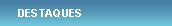
<style>
.page{position:relative;width:172px;height:26px}
.page>*{position:absolute;margin:0}
.t1{font:11px "Arial-BoldMT";color:#fffdfd;scale:1.04 1}
</style>
<div class="page">
<p class="t1" style="left:18px;top:9px;width:63px;height:9px">DESTAQUES</p>
</div>
